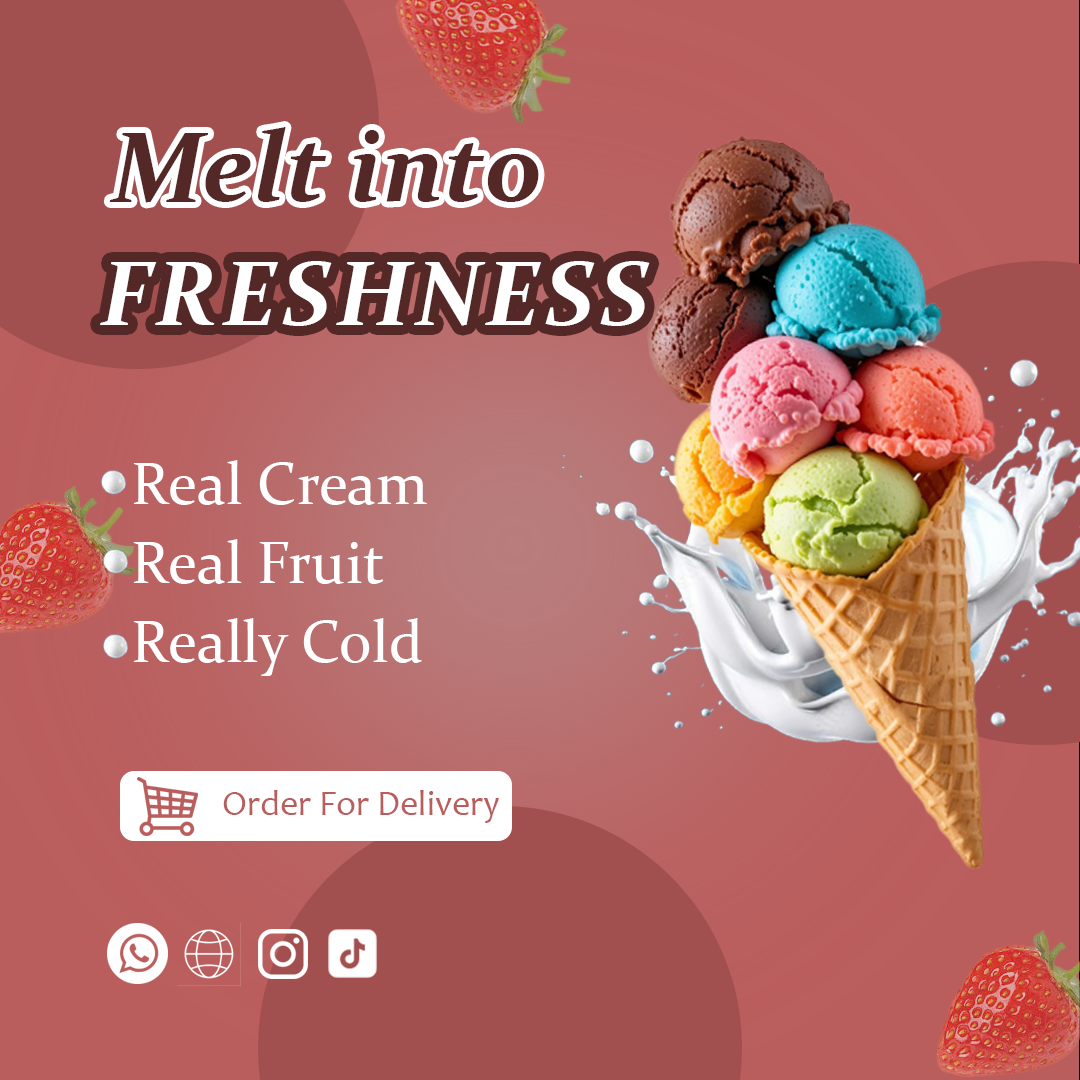
<style>
.page{position:relative;width:1080px;height:1080px}
.page>*{position:absolute;margin:0}
.t1{font:100px "Constantia-BoldItalic";color:#552828}
.t2{font:90px "Constantia-BoldItalic";color:#ffffff;text-transform:uppercase}
.t3{font:60px "Constantia";color:#ffffff}
.t4{font:36px "Candara";color:#ba5d5d}
</style>
<div class="page">
<p class="t1" style="left:109px;top:127px;width:430px;height:76px">Melt into</p>
<p class="t2" style="left:100px;top:261px;width:550px;height:65px">Freshness</p>
<p class="t3" style="left:133px;top:460px;width:294px;height:45px">Real Cream</p>
<p class="t3" style="left:133px;top:539px;width:250px;height:45px">Real Fruit</p>
<p class="t3" style="left:133px;top:618px;width:289px;height:58px">Really Cold</p>
<p class="t4" style="left:223px;top:790px;width:276px;height:33px">Order For Delivery</p>
</div>
